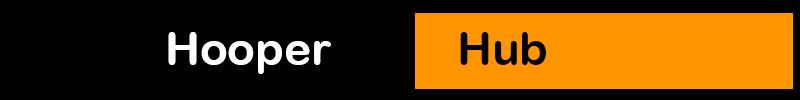
<style>
.page{position:relative;width:800px;height:100px;background:#000000}
.page>*{position:absolute;margin:0}
.t1{font:45.7px "ArialRoundedMTBold";color:#ffffff}
.t2{font:45.7px "ArialRoundedMTBold";color:#000000}
</style>
<div class="page">
<p class="t1" style="left:168px;top:32px;width:163px;height:42px">Hooper</p>
<p class="t2" style="left:460px;top:32px;width:86px;height:33px">Hub</p>
</div>
